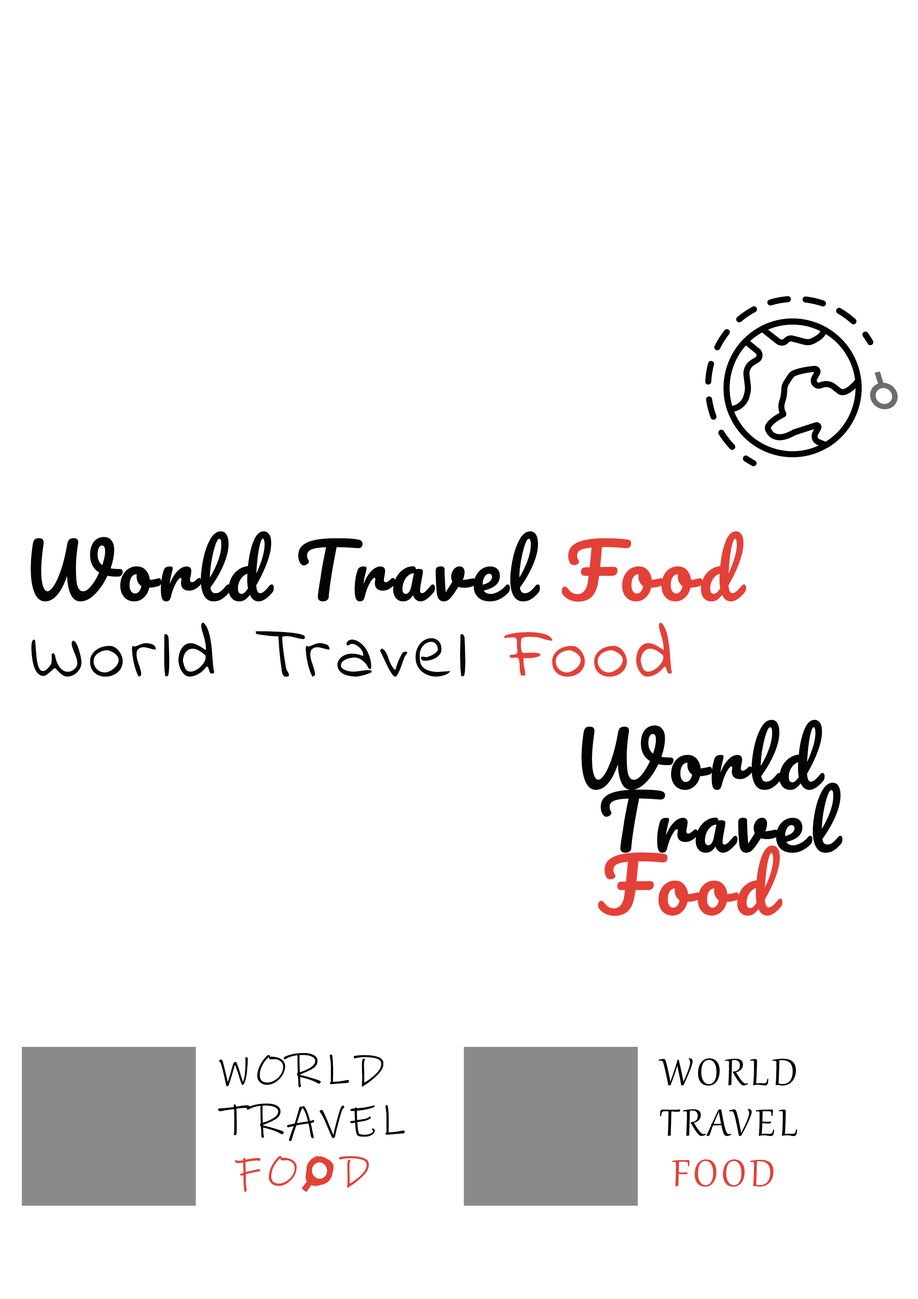
<style>
.page{position:relative;width:918px;height:1299px;background:#ffffff}
.page>*{position:absolute;margin:0}
.t1{font:74px "Pacifico-Regular";letter-spacing:0.08em;color:#040404}
.t2{font:74px "Pacifico-Regular";letter-spacing:0.08em;color:#e34138}
.t3{font:74px "IndieFlower";letter-spacing:0.08em;color:#040404}
.t4{font:74px "IndieFlower";letter-spacing:0.08em;color:#e34138}
.t5{font:74px/62.9px "Pacifico-Regular";letter-spacing:0.08em;color:#040404}
.t6{font:74px/62.9px "Pacifico-Regular";letter-spacing:0.08em;color:#e34138}
.t7{font:46.3px/50.5px "InkFree";letter-spacing:0.08em;color:#040404}
.t8{font:46.3px/50.5px "InkFree";letter-spacing:0.08em;color:#e34138}
.t9{font:46.3px/50.5px "Gabriola";letter-spacing:0.08em;color:#040404}
.t10{font:46.3px/50.5px "Gabriola";letter-spacing:0.08em;color:#e34138}
</style>
<div class="page">
<p class="t1" style="left:31px;top:531px;width:715px;height:71px">World Travel <span class="t2">Food</span></p>
<p class="t3" style="left:31px;top:622px;width:641px;height:55px">World Travel <span class="t4">Food</span></p>
<p class="t5" style="left:582px;top:720px;width:261px;height:196px;text-align:justify">World<br> Travel<br> <span class="t6">Food</span></p>
<p class="t7" style="left:218px;top:1053px;width:187px;height:139px;text-align:justify">WORLD <br>TRAVEL <br><span class="t8"> FOOD</span></p>
<p class="t9" style="left:659px;top:1058px;width:138px;height:129px;text-align:justify">WORLD <br>TRAVEL <br><span class="t10"> FOOD</span></p>
</div>
